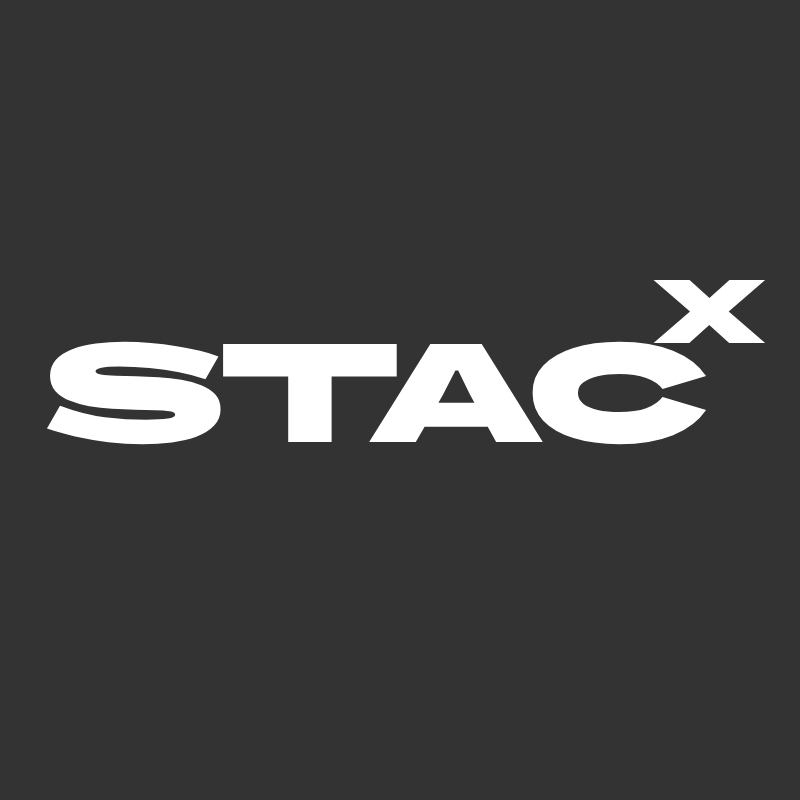
<style>
.page{position:relative;width:800px;height:800px;background:#333333}
.page>*{position:absolute;margin:0}
.t1{font:90px "BBHSansBartle-Regular";color:#ffffff}
.t2{font:140px "BBHSansBartle-Regular";color:#ffffff}
</style>
<div class="page">
<p class="t1" style="left:653px;top:280px;width:113px;height:63px">x</p>
<p class="t2" style="left:46px;top:341px;width:661px;height:104px">STAC</p>
</div>
